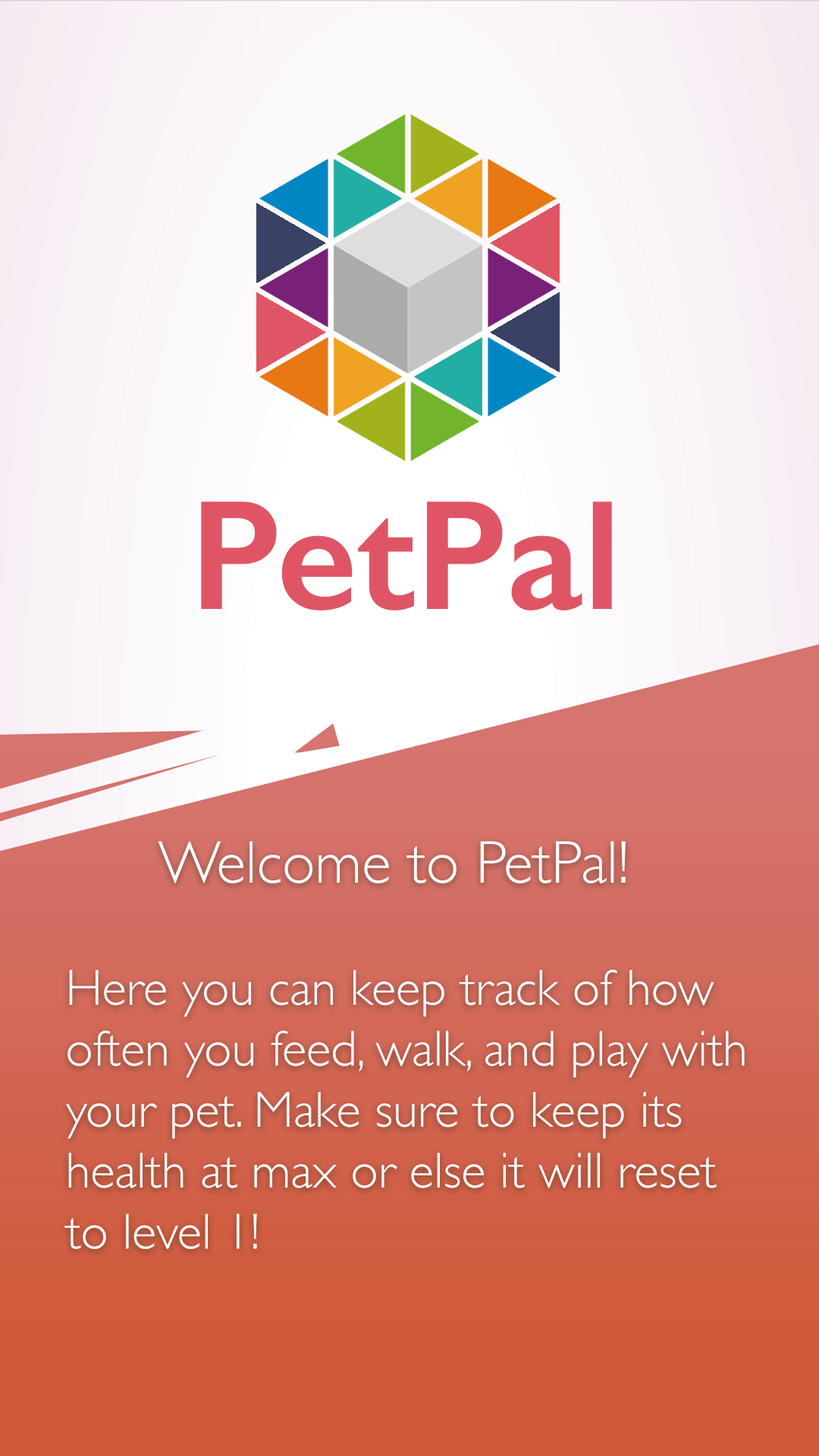
<style>
.page{position:relative;width:819px;height:1456px}
.page>*{position:absolute;margin:0}
.t1{font:157px "GillSans-SemiBold";color:#e05565}
.t2{font:50.8px "GillSans-Light";color:#ffffff}
.t3{font:60.7px "GillSans-Light";color:#ffffff}
</style>
<div class="page">
<p class="t1" style="left:201px;top:501px;width:411px;height:109px">PetPal</p>
<p class="t2" style="left:64px;top:841px;width:681px;height:408px;text-align:center"><span class="t3"><br>    Welcome to PetPal! <br></span><br>Here you can keep track of how often you feed, walk, and play with your pet. Make sure to keep its health at max or else it will reset to level 1!</p>
</div>
